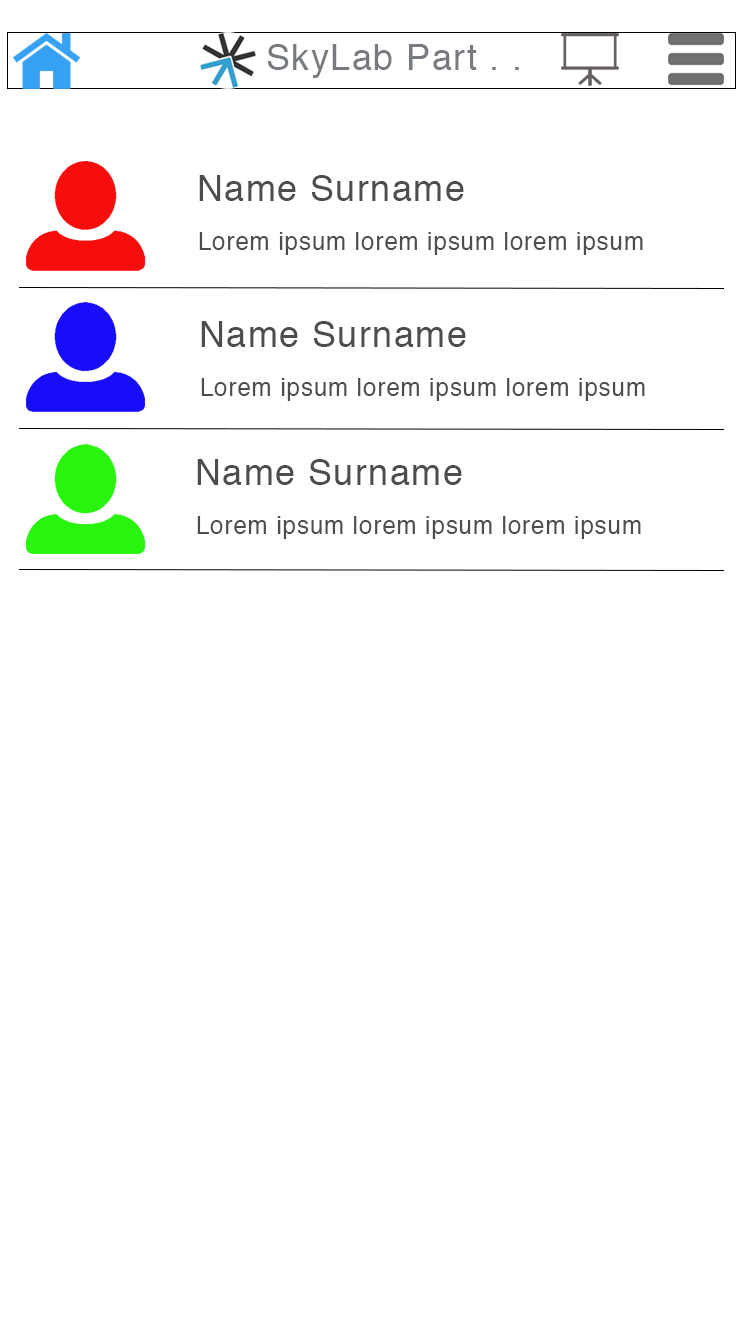
<style>
.page{position:relative;width:750px;height:1334px;background:#ffffff}
.page>*{position:absolute;margin:0}
.t1{font:36px "Helvetica";letter-spacing:0.04em;color:#777b7f}
.t2{font:36px "Helvetica";letter-spacing:0.04em;color:#4f4c4c}
.t3{font:24px "Helvetica";letter-spacing:0.04em;color:#4f4c4c}
</style>
<div class="page">
<p class="t1" style="left:267px;top:44px;width:252px;height:34px">SkyLab Part . .</p>
<p class="t2" style="left:199px;top:175px;width:265px;height:26px">Name Surname</p>
<p class="t3" style="left:199px;top:232px;width:444px;height:23px">Lorem ipsum lorem ipsum lorem ipsum</p>
<p class="t2" style="left:201px;top:321px;width:265px;height:26px">Name Surname</p>
<p class="t3" style="left:201px;top:378px;width:444px;height:23px">Lorem ipsum lorem ipsum lorem ipsum</p>
<p class="t2" style="left:197px;top:459px;width:265px;height:26px">Name Surname</p>
<p class="t3" style="left:197px;top:516px;width:444px;height:23px">Lorem ipsum lorem ipsum lorem ipsum</p>
</div>
